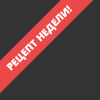
<style>
.page{position:relative;width:100px;height:100px;background:#333333}
.page>*{position:absolute;margin:0}
.t1{font:10px "OpenSans-Extrabold";color:#ffffff;text-transform:uppercase}
</style>
<div class="page">
<p class="t1" style="left:6px;top:5px;width:66px;height:66px;rotate:-45deg">Рецепт недели!</p>
</div>
